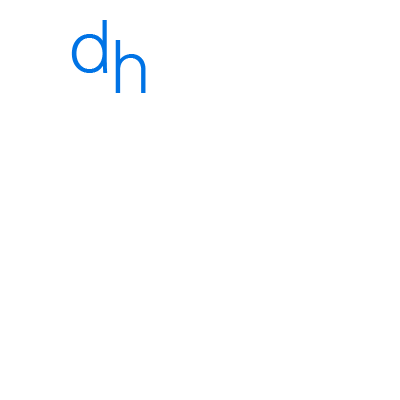
<style>
.page{position:relative;width:400px;height:400px;background:#ffffff}
.page>*{position:absolute;margin:0}
.t1{font:72px "Ciscolight";color:#0073e5}
</style>
<div class="page">
<p class="t1" style="left:71px;top:20px;width:37px;height:53px">d</p>
<p class="t1" style="left:115px;top:40px;width:31px;height:53px">h</p>
</div>
